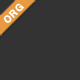
<style>
.page{position:relative;width:80px;height:80px;background:#333333}
.page>*{position:absolute;margin:0}
.t1{font:10px "Helvetica-Bold";letter-spacing:0.1em;color:#ffffff}
</style>
<div class="page">
<p class="t1" style="left:3px;top:3px;width:21px;height:20px;rotate:-45deg">ORG</p>
</div>
